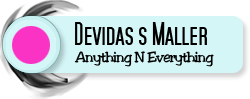
<style>
.page{position:relative;width:250px;height:99px;background:#d4f6f7}
.page>*{position:absolute;margin:0}
.t1{font:30px "SFMoviePoster";letter-spacing:-0.05em;color:#000000}
.t2{font:14px "Toledo";letter-spacing:-0.05em;color:#000000}
</style>
<div class="page">
<p class="t1" style="left:75px;top:22px;width:132px;height:23px">Devidas s Maller</p>
<p class="t2" style="left:74px;top:51px;width:140px;height:16px">Anything N Everything</p>
</div>
